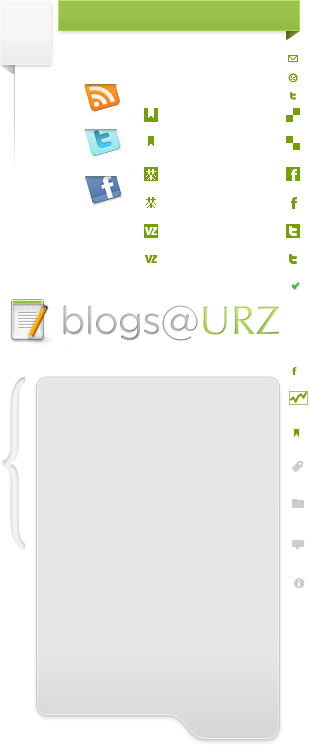
<style>
.page{position:relative;width:310px;height:747px;background:#ffffff}
.page>*{position:absolute;margin:0}
.t1{font:38.5px "GothamRounded-Book";letter-spacing:-0.025em;color:#a7a7a7}
.t2{font:40.1px "GothamRounded-Book";color:#a7a7a7}
.t3{font:40.1px "Optima-Regular";color:#9bc34b}
.t4{font:199.7px "HoeflerText-Regular";color:#dcdcdc;scale:0.5 1}
</style>
<div class="page">
<p class="t1" style="left:63px;top:305px;width:216px;height:36px">blogs<span class="t2">@</span><span class="t3">URZ</span></p>
<p class="t1" style="left:63px;top:305px;width:216px;height:36px">blogs<span class="t2">@</span><span class="t3">URZ</span></p>
<p class="t4" style="left:2px;top:377px;width:24px;height:173px">{</p>
</div>
